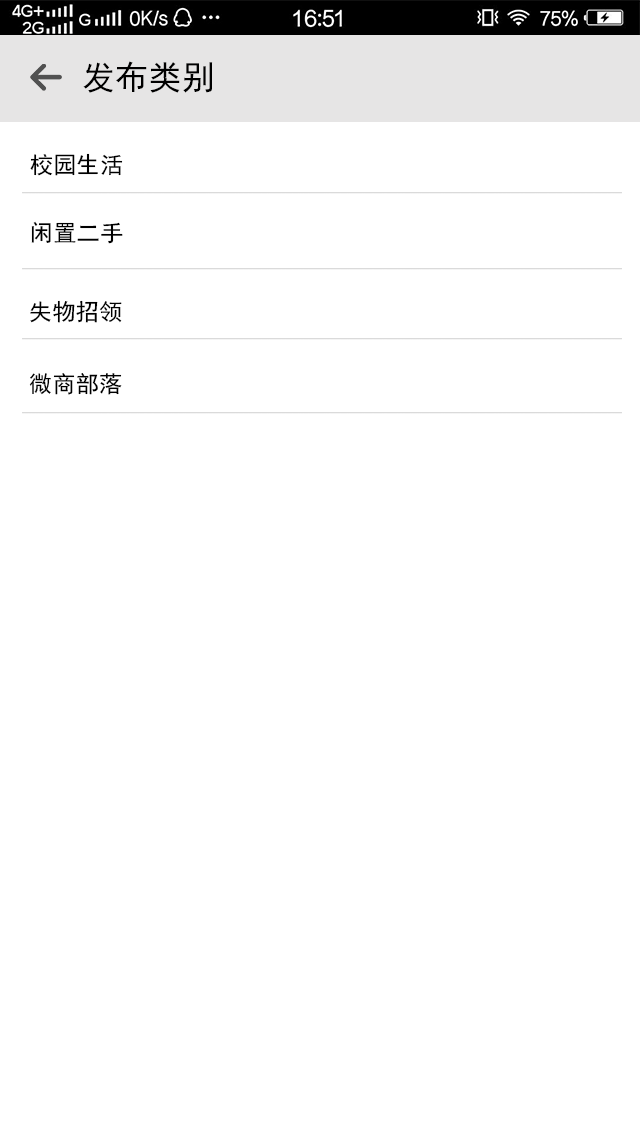
<style>
.page{position:relative;width:640px;height:1136px;background:#ffffff}
.page>*{position:absolute;margin:0}
.t1{font:33.3px "SimHei";letter-spacing:0.002em;color:#000000}
.t2{font:23.3px "SimHei";letter-spacing:0.002em;color:#000000}
</style>
<div class="page">
<p class="t1" style="left:83px;top:61px;width:130px;height:32px">发布类别</p>
<p class="t2" style="left:30px;top:153px;width:93px;height:23px">校园生活</p>
<p class="t2" style="left:31px;top:221px;width:92px;height:23px">闲置二手</p>
<p class="t2" style="left:30px;top:300px;width:92px;height:23px">失物招领</p>
<p class="t2" style="left:29px;top:373px;width:93px;height:22px">微商部落</p>
</div>
